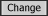
<style>
.page{position:relative;width:48px;height:16px;background:#cdcdcd}
.page>*{position:absolute;margin:0}
.t1{font:10px "Tahoma"}
</style>
<div class="page">
<p class="t1" style="left:7px;top:3px;width:34px;height:11px">Change</p>
</div>
